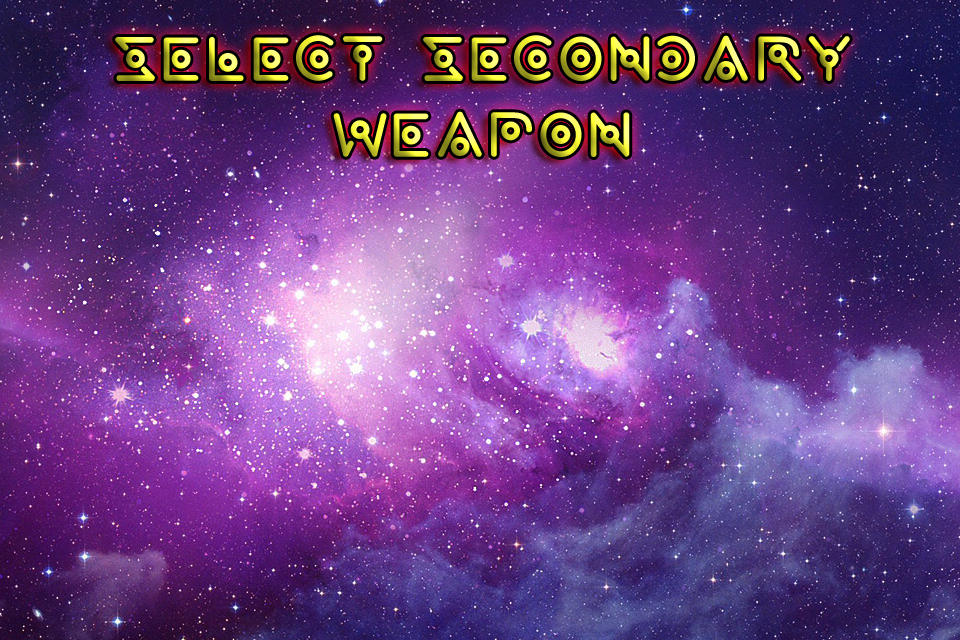
<style>
.page{position:relative;width:960px;height:640px}
.page>*{position:absolute;margin:0}
.t1{font:64px "wearealien!!"}
</style>
<div class="page">
<p class="t1" style="left:115px;top:35px;width:735px;height:122px;text-align:center">select Secondary<br>weapon</p>
</div>
